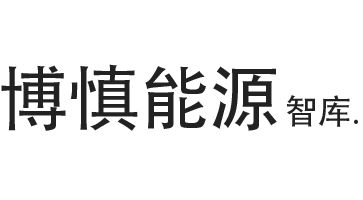
<style>
.page{position:relative;width:363px;height:200px;background:#ffffff}
.page>*{position:absolute;margin:0}
.t1{font:72px "AdobeHeitiStd-Regular";letter-spacing:-0.025em;color:#222222}
.t2{font:34px "AdobeHeitiStd-Regular";color:#222222}
.t3{font:34px "MyriadPro-Regular";color:#222222}
</style>
<div class="page">
<p class="t1" style="left:1px;top:64px;width:276px;height:67px">博慎能源</p>
<p class="t2" style="left:287px;top:95px;width:71px;height:32px">智库<span class="t3">.</span></p>
</div>
